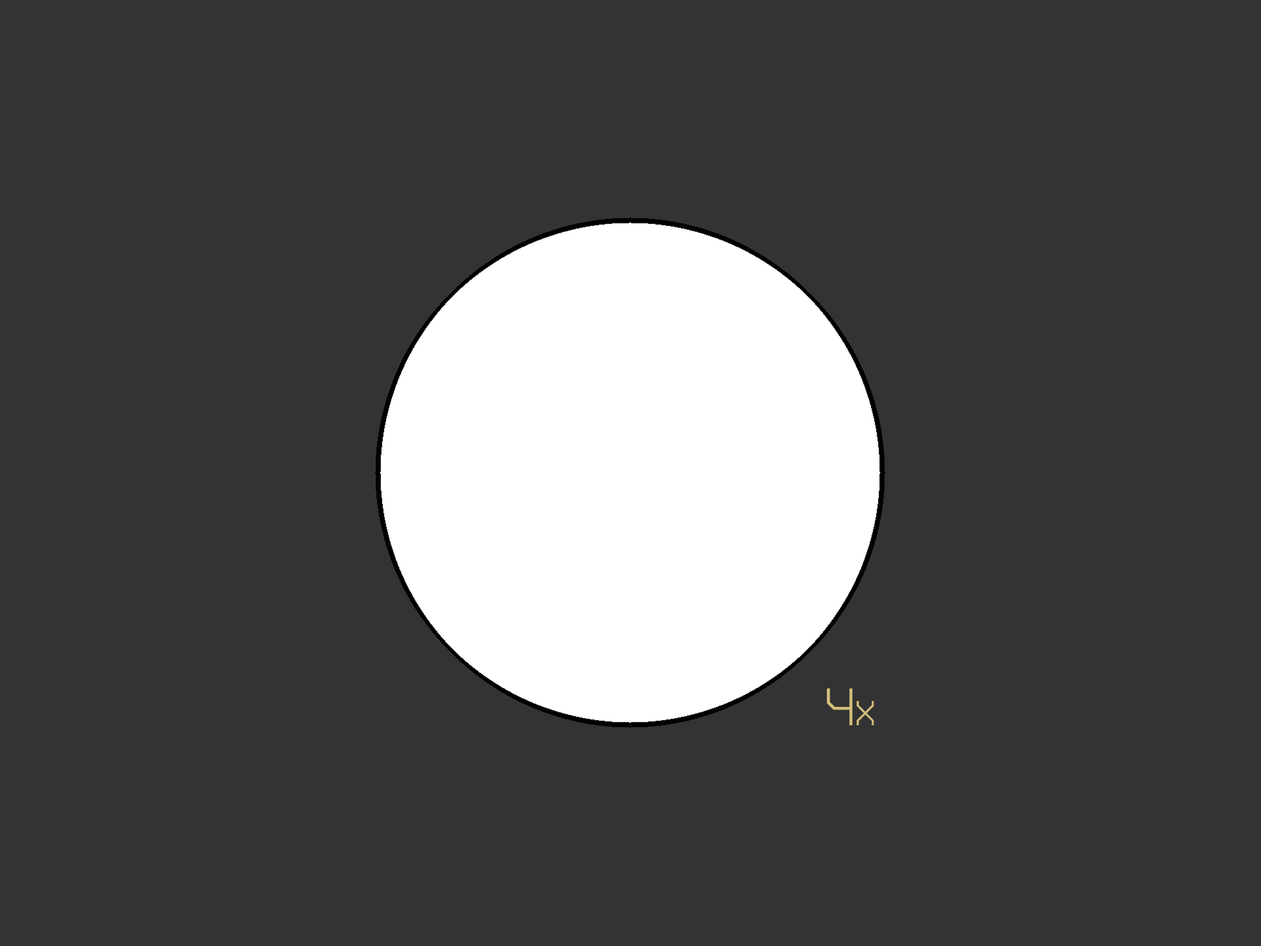
<style>
.page{position:relative;width:1261px;height:946px;background:#333333}
.page>*{position:absolute;margin:0}
.t1{font:52.5px "Arame-Thin";color:#d2bf7a}
.t2{font:34.8px "Arame-Thin";color:#d2bf7a}
</style>
<div class="page">
<p class="t1" style="left:827px;top:688px;width:47px;height:37px">4<span class="t2">x</span></p>
</div>
